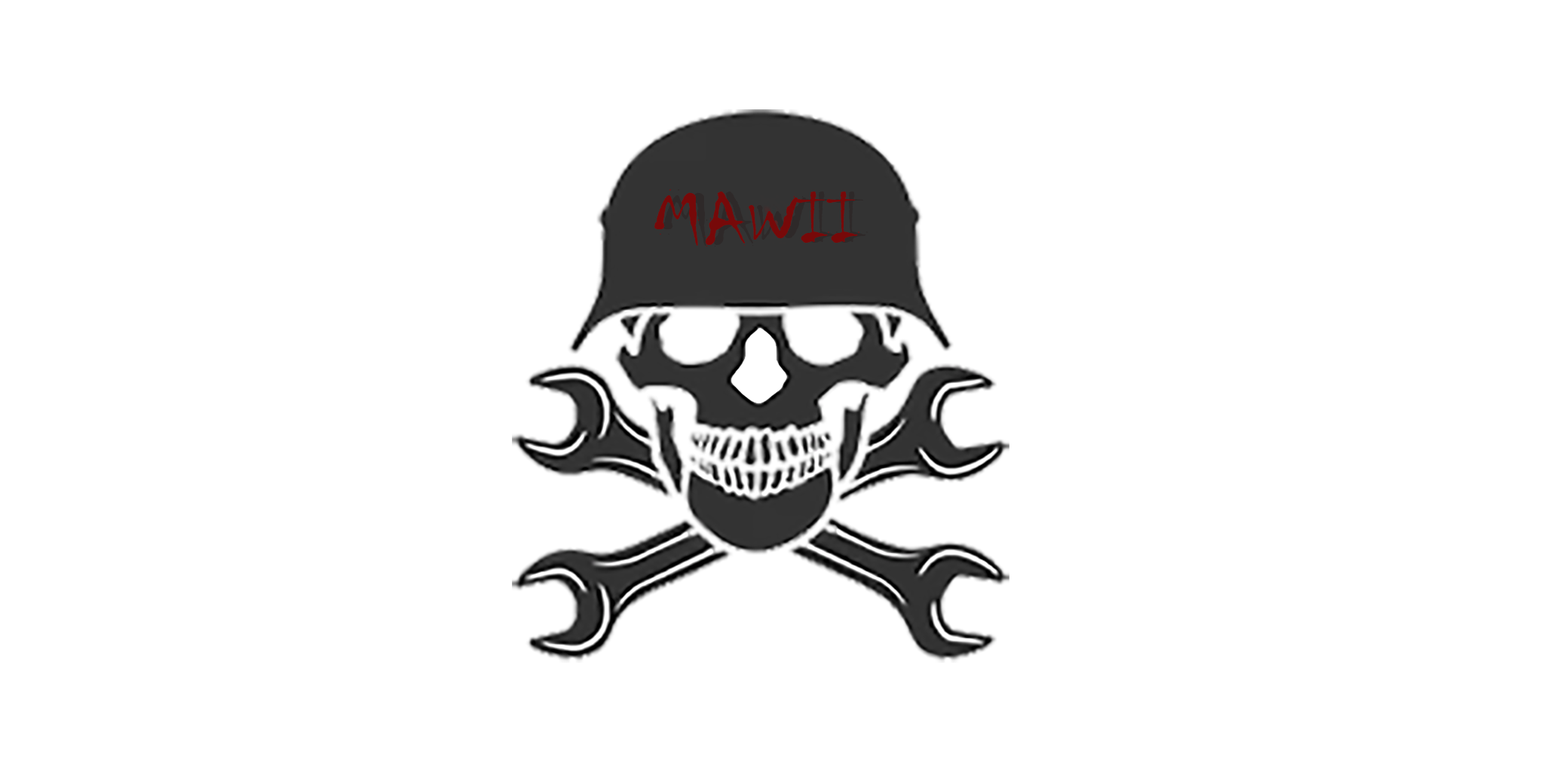
<style>
.page{position:relative;width:1544px;height:772px;background:#ffffff}
.page>*{position:absolute;margin:0}
.t1{font:73.3px "Chiller-Regular";color:#770909;scale:1.18 1}
</style>
<div class="page">
<p class="t1" style="left:655px;top:189px;width:205px;height:58px">MAWII</p>
</div>
